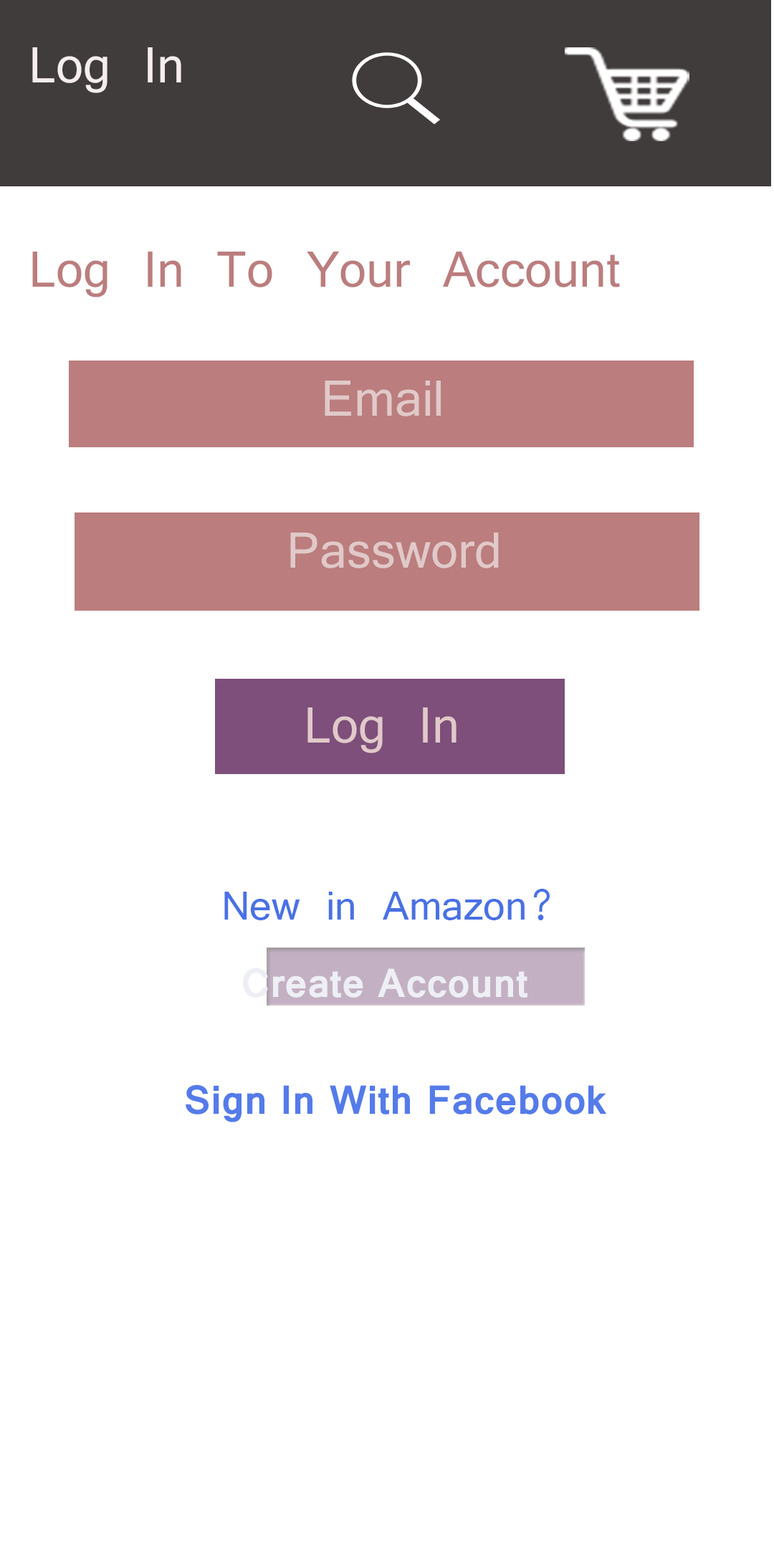
<style>
.page{position:relative;width:774px;height:1541px;background:#ffffff}
.page>*{position:absolute;margin:0}
.t1{font:54.7px "Vrinda";color:#f6eded}
.t2{font:54.9px "Vrinda";color:#bb7d7d}
.t3{font:54.9px "Vrinda";color:#e1c9c9}
.t4{font:54.7px "Vrinda";color:#e1c9c9}
.t5{font:43.7px "Vrinda";color:#4971e4}
.t6{font:43.8px "Vrinda-Bold";color:#edeff5}
.t7{font:43.8px "Vrinda-Bold";color:#547be9}
</style>
<div class="page">
<p class="t1" style="left:32px;top:47px;width:149px;height:46px">Log In</p>
<p class="t2" style="left:32px;top:252px;width:588px;height:45px">Log In To Your Account</p>
<p class="t3" style="left:325px;top:381px;width:116px;height:35px">Email</p>
<p class="t3" style="left:290px;top:532px;width:209px;height:36px">Password</p>
<p class="t4" style="left:307px;top:707px;width:149px;height:46px">Log In</p>
<p class="t5" style="left:224px;top:889px;width:326px;height:31px">New in Amazon?</p>
<p class="t6" style="left:243px;top:967px;width:284px;height:31px">Create Account</p>
<p class="t7" style="left:186px;top:1084px;width:420px;height:38px">Sign In With Facebook</p>
</div>
